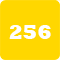
<style>
.page{position:relative;width:60px;height:60px;background:#ffd700}
.page>*{position:absolute;margin:0}
.t1{font:20.8px "Rockwell-ExtraBold";color:#ffffff}
</style>
<div class="page">
<p class="t1" style="left:9px;top:25px;width:42px;height:14px">256</p>
</div>
